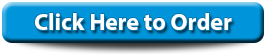
<style>
.page{position:relative;width:267px;height:54px;background:#0095da}
.page>*{position:absolute;margin:0}
.t1{font:23.9px "MyriadPro-Bold";color:#ffffff}
</style>
<div class="page">
<p class="t1" style="left:35px;top:13px;width:197px;height:17px">Click Here to Order</p>
</div>
